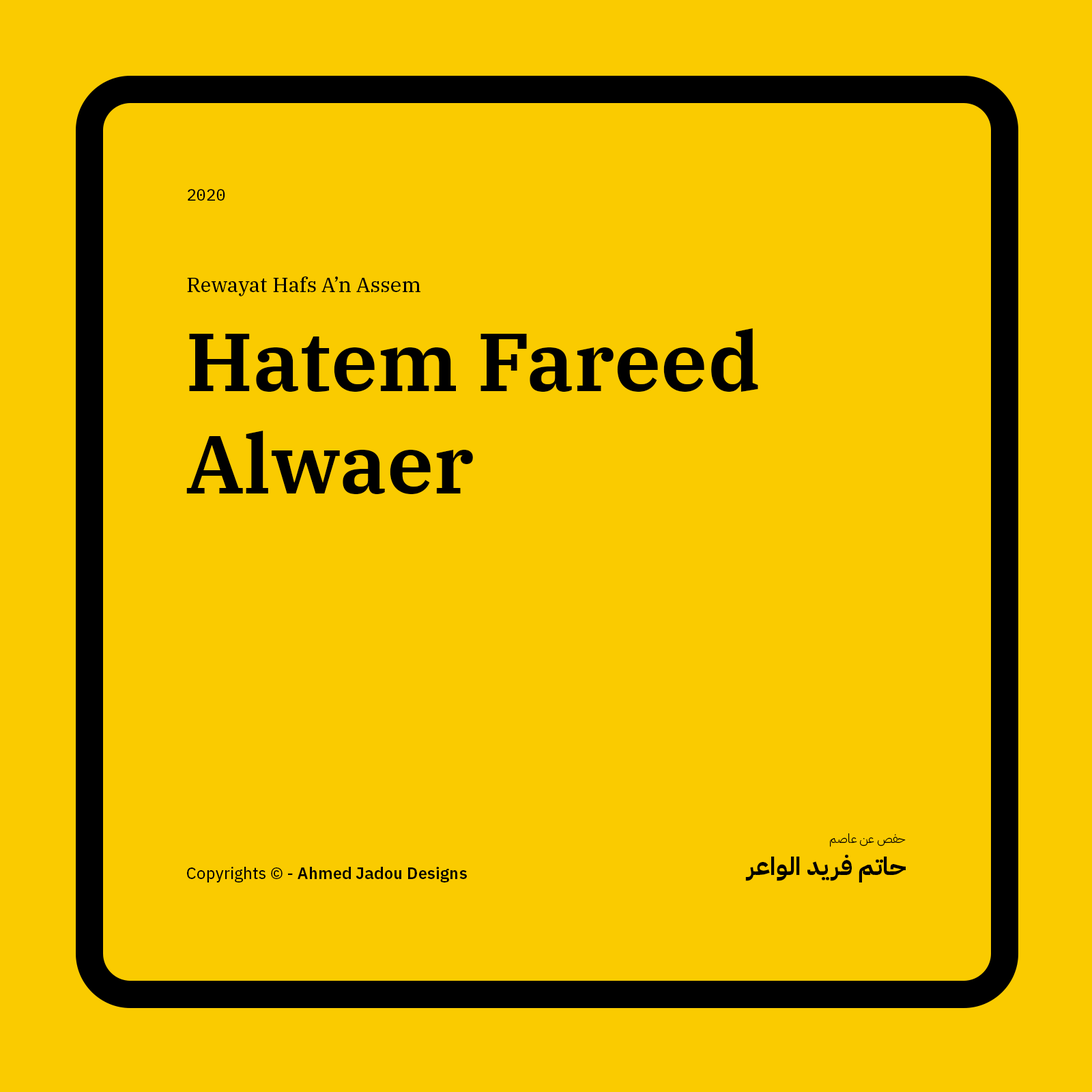
<style>
.page{position:relative;width:1092px;height:1092px;background:#facb00}
.page>*{position:absolute;margin:0}
.t1{font:16.4px "IBMPlexMono-Text";color:#000000}
.t2{font:20.5px "IBMPlexSerif-Text";color:#000000}
.t3{font:81.9px/102.7px "IBMPlexSerif-SemiBold";color:#000000}
.t4{font:12.3px "IBMPlexArabic-Light";color:#000000}
.t5{font:24.6px "IBMPlexArabic-Bold";color:#000000}
.t6{font:16.4px "IBMPlexSans-SemiBold";color:#000000}
.t7{font:16.4px "IBMPlexSans-Text";color:#000000}
</style>
<div class="page">
<p class="t1" style="left:188px;top:189px;width:37px;height:12px">2020</p>
<p class="t2" style="left:187px;top:276px;width:233px;height:20px">Rewayat Hafs A’n Assem</p>
<p class="t3" style="left:186px;top:328px;width:572px;height:166px">Hatem Fareed Alwaer</p>
<p class="t4" style="left:830px;top:833px;width:76px;height:14px">حفص عن عاصم</p>
<p class="t5" style="left:745px;top:854px;width:161px;height:28px">حاتم فريد الواعر</p>
<p class="t6" style="left:187px;top:867px;width:280px;height:15px"><span class="t7">Copyrights © - </span>Ahmed Jadou Designs</p>
</div>
